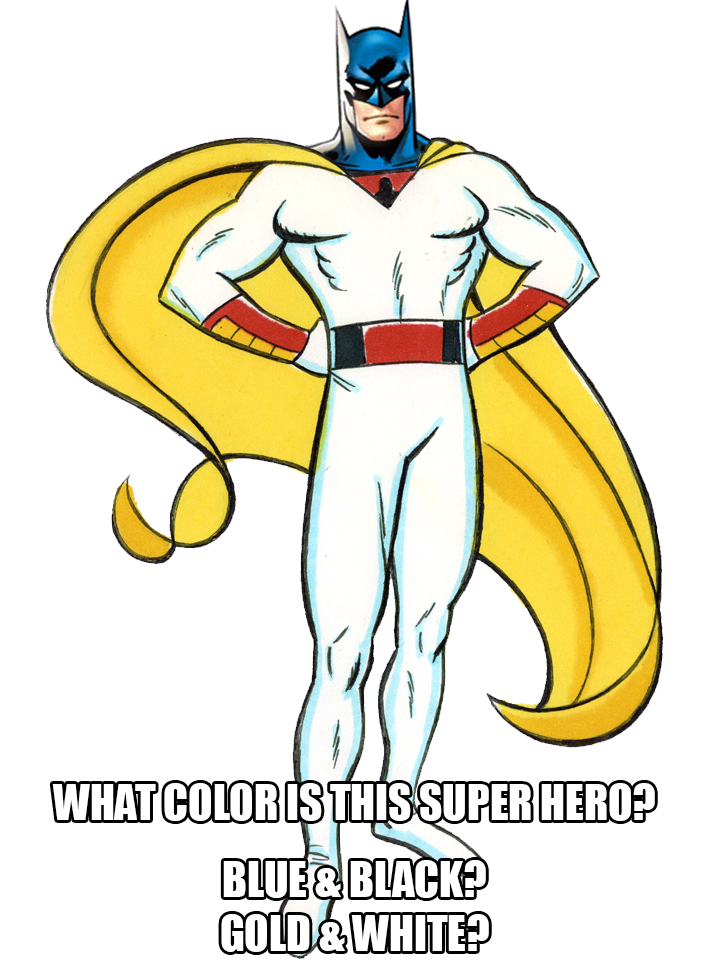
<style>
.page{position:relative;width:722px;height:977px;background:#ffffff}
.page>*{position:absolute;margin:0}
.t1{font:44.9px "Impact";color:#ffffff}
</style>
<div class="page">
<p class="t1" style="left:52px;top:783px;width:603px;height:38px">WHAT COLOR IS THIS SUPER HERO?</p>
<p class="t1" style="left:221px;top:860px;width:268px;height:92px;text-align:center">BLUE &amp; BLACK?<br>GOLD &amp; WHITE?</p>
</div>
